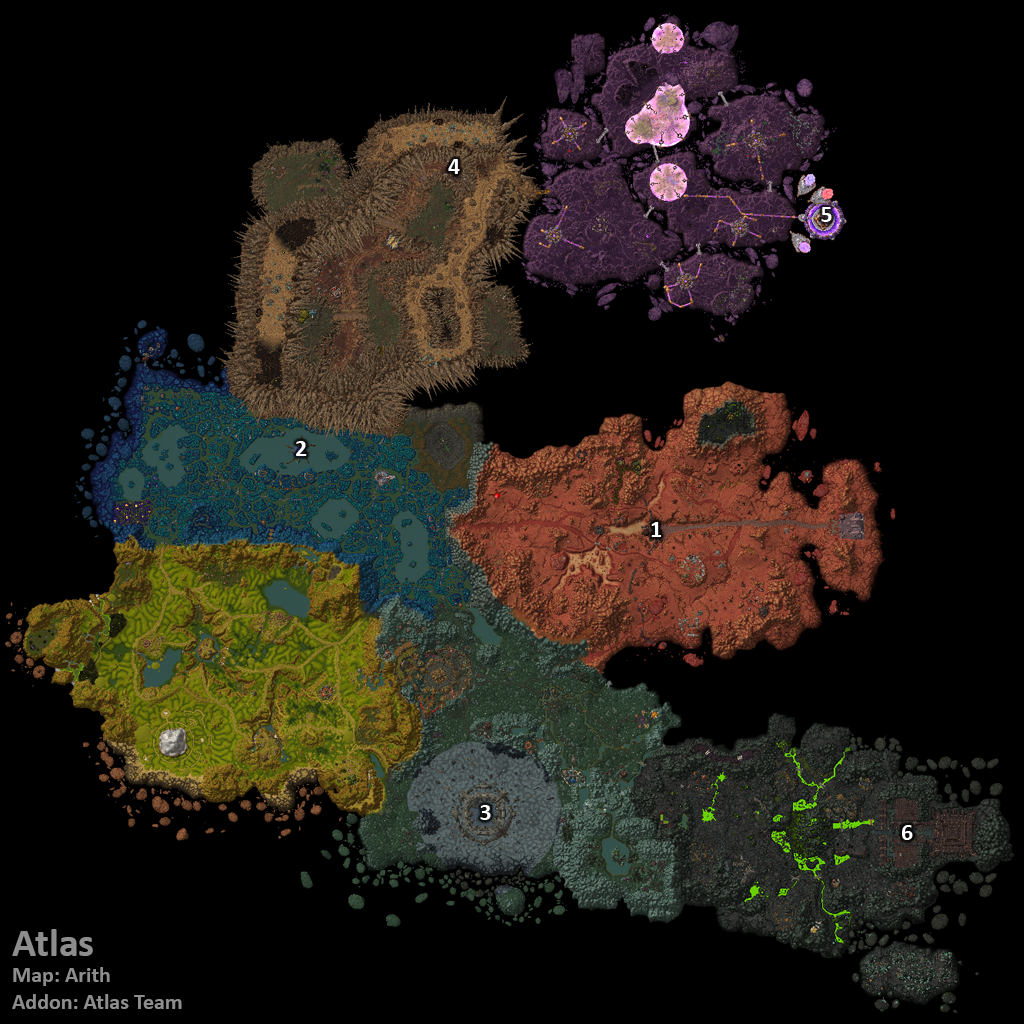
<style>
.page{position:relative;width:1024px;height:1024px;background:#000000}
.page>*{position:absolute;margin:0}
.t1{font:24px "Calibri-Bold";color:#ffffff}
.t2{font:22px "Calibri-Bold";color:#8d8d8d}
.t3{font:40px "Calibri-Bold";color:#8d8d8d}
</style>
<div class="page">
<p class="t1" style="left:448px;top:159px;width:12px;height:15px">4</p>
<p class="t1" style="left:821px;top:207px;width:11px;height:15px">5</p>
<p class="t1" style="left:296px;top:441px;width:11px;height:15px">2</p>
<p class="t1" style="left:651px;top:522px;width:10px;height:15px">1</p>
<p class="t1" style="left:480px;top:805px;width:11px;height:15px">3</p>
<p class="t1" style="left:902px;top:825px;width:11px;height:15px">6</p>
<p class="t2" style="left:12px;top:929px;width:170px;height:80px"><span class="t3">Atlas<br></span>Map: Arith<br>Addon: Atlas Team</p>
</div>
